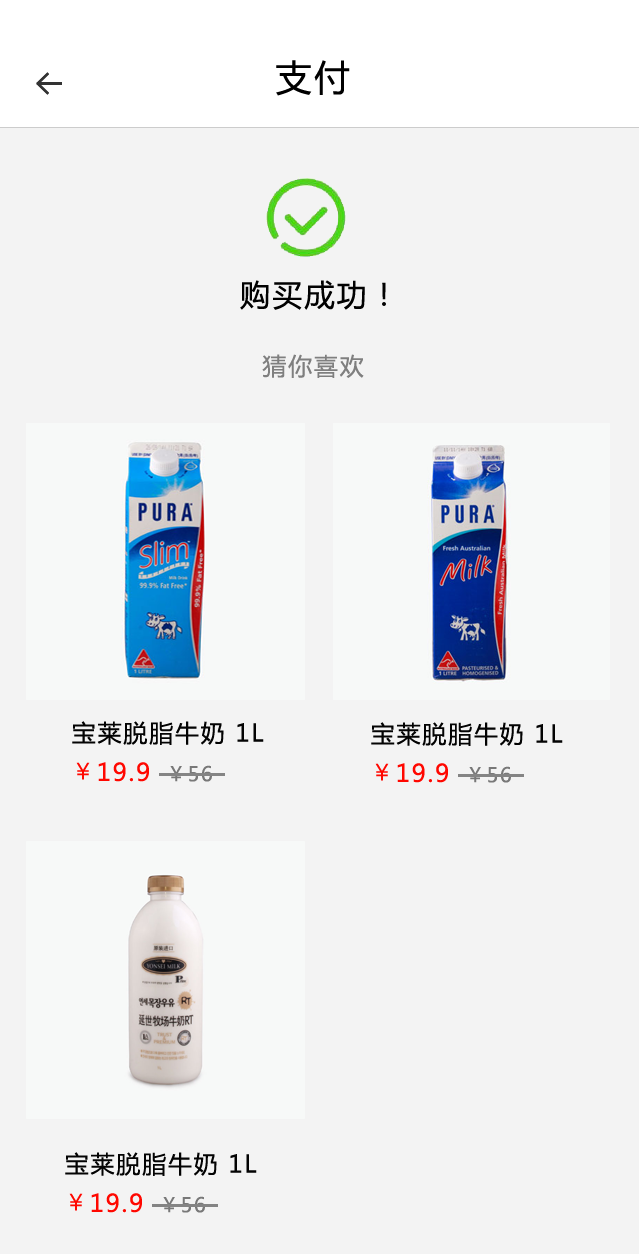
<style>
.page{position:relative;width:639px;height:1254px;background:#f3f3f3}
.page>*{position:absolute;margin:0}
.t1{font:36px "MicrosoftYaHei";letter-spacing:0.075em;color:#000000}
.t2{font:30px "MicrosoftYaHei";letter-spacing:0.075em;color:#010101}
.t3{font:24px "MicrosoftYaHei";letter-spacing:0.075em;color:#7f7f7f}
.t4{font:24px "MicrosoftYaHei";letter-spacing:0.075em;color:#030303}
.t5{font:24px "MicrosoftYaHei";letter-spacing:0.075em;color:#ff0700}
.t6{font:24px "STHeitiSC-Light";letter-spacing:0.075em;color:#ff0700}
.t7{font:20px "MicrosoftYaHei";letter-spacing:0.075em;color:#787878}
</style>
<div class="page">
<p class="t1" style="left:276px;top:60px;width:74px;height:36px">支付</p>
<p class="t2" style="left:240px;top:280px;width:146px;height:30px">购买成功！</p>
<p class="t3" style="left:262px;top:354px;width:102px;height:24px">猜你喜欢</p>
<p class="t4" style="left:72px;top:721px;width:192px;height:24px">宝莱脱脂牛奶 1L</p>
<p class="t4" style="left:371px;top:722px;width:192px;height:24px">宝莱脱脂牛奶 1L</p>
<p class="t5" style="left:76px;top:762px;width:73px;height:20px"><span class="t6">￥</span>19.9</p>
<p class="t7" style="left:170px;top:765px;width:42px;height:17px">￥56</p>
<p class="t5" style="left:375px;top:763px;width:73px;height:20px"><span class="t6">￥</span>19.9</p>
<p class="t7" style="left:469px;top:766px;width:42px;height:17px">￥56</p>
<p class="t4" style="left:65px;top:1152px;width:192px;height:24px">宝莱脱脂牛奶 1L</p>
<p class="t5" style="left:69px;top:1193px;width:73px;height:20px"><span class="t6">￥</span>19.9</p>
<p class="t7" style="left:163px;top:1196px;width:42px;height:17px">￥56</p>
</div>
